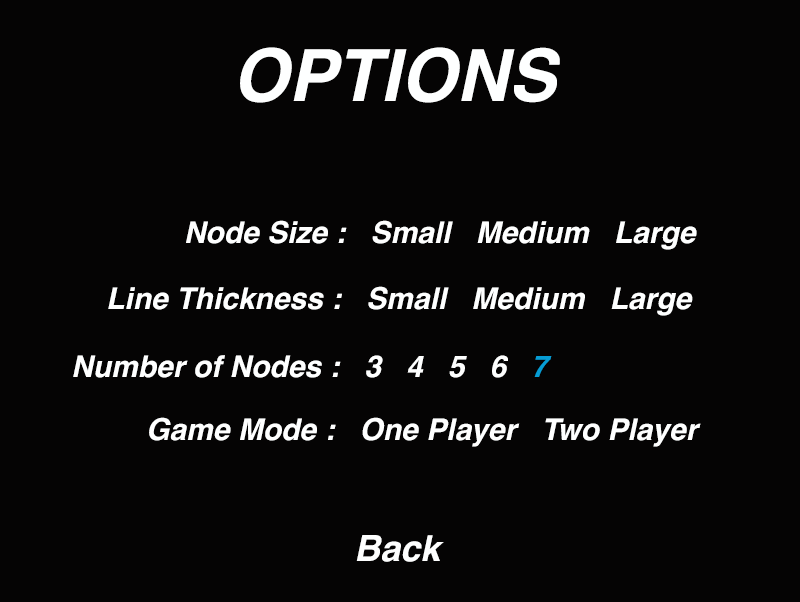
<style>
.page{position:relative;width:800px;height:602px;background:#050404}
.page>*{position:absolute;margin:0}
.t1{font:72px "Helvetica-BoldOblique";color:#feffff}
.t2{font:30px "Helvetica-BoldOblique";color:#feffff}
.t3{font:30px "Helvetica-BoldOblique";color:#069dd5}
.t4{font:36px "Helvetica-BoldOblique";color:#feffff}
</style>
<div class="page">
<p class="t1" style="left:240px;top:47px;width:320px;height:56px">OPTIONS</p>
<p class="t2" style="left:186px;top:220px;width:511px;height:30px">Node Size :   Small   Medium   Large</p>
<p class="t2" style="left:108px;top:286px;width:585px;height:30px">Line Thickness :   Small   Medium   Large</p>
<p class="t2" style="left:73px;top:355px;width:479px;height:23px">Number of Nodes :   3   4   5   6   <span class="t3">7</span></p>
<p class="t2" style="left:149px;top:417px;width:552px;height:30px">Game Mode :   One Player   Two Player</p>
<p class="t4" style="left:356px;top:535px;width:88px;height:27px">Back</p>
</div>
